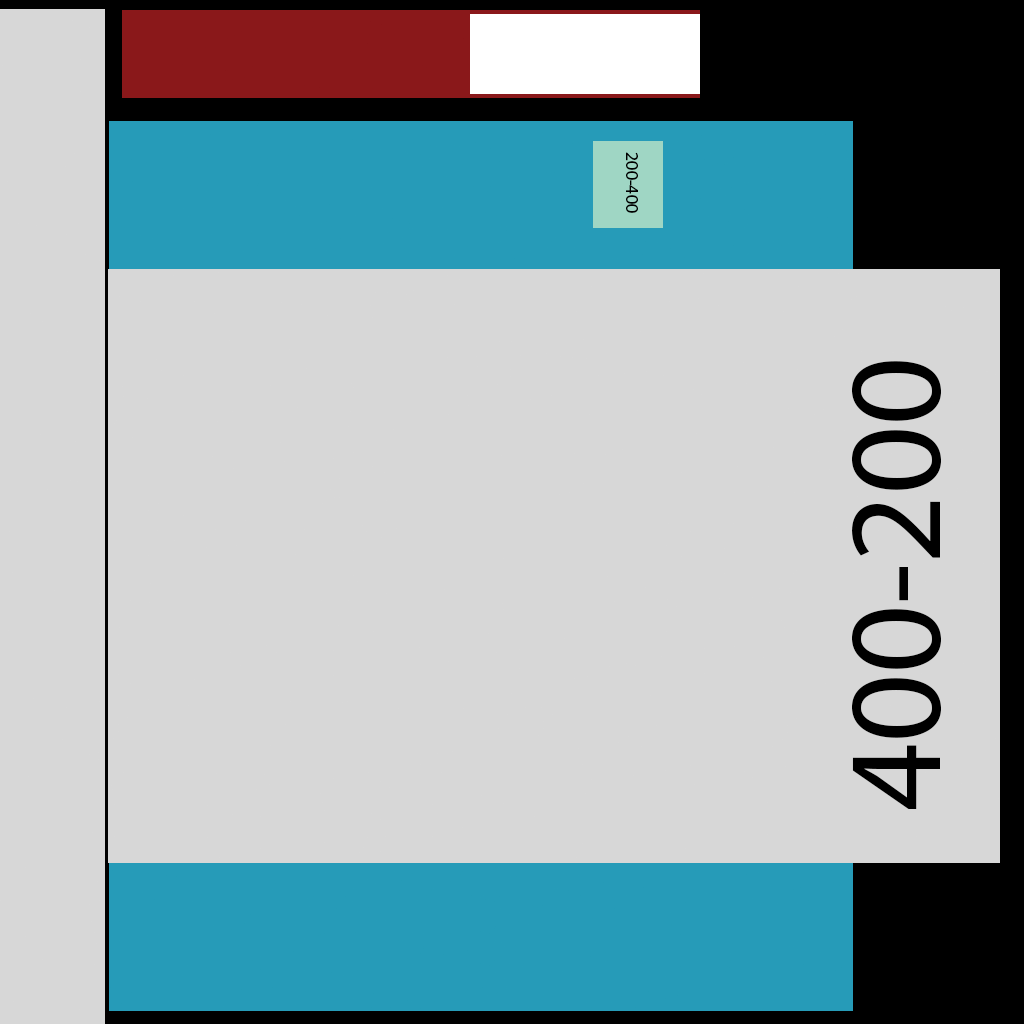
<style>
.page{position:relative;width:1024px;height:1024px;background:#d7d7d7}
.page>*{position:absolute;margin:0}
.t1{font:18px "MyriadPro-Regular";color:#000000}
.t2{font:134.3px "MyriadPro-Regular";color:#000000}
</style>
<div class="page">
<p class="t1" style="left:626px;top:152px;width:12px;height:61px;rotate:90deg">200-400</p>
<p class="t2" style="left:852px;top:361px;width:89px;height:448px;rotate:-90deg">400-200</p>
</div>
